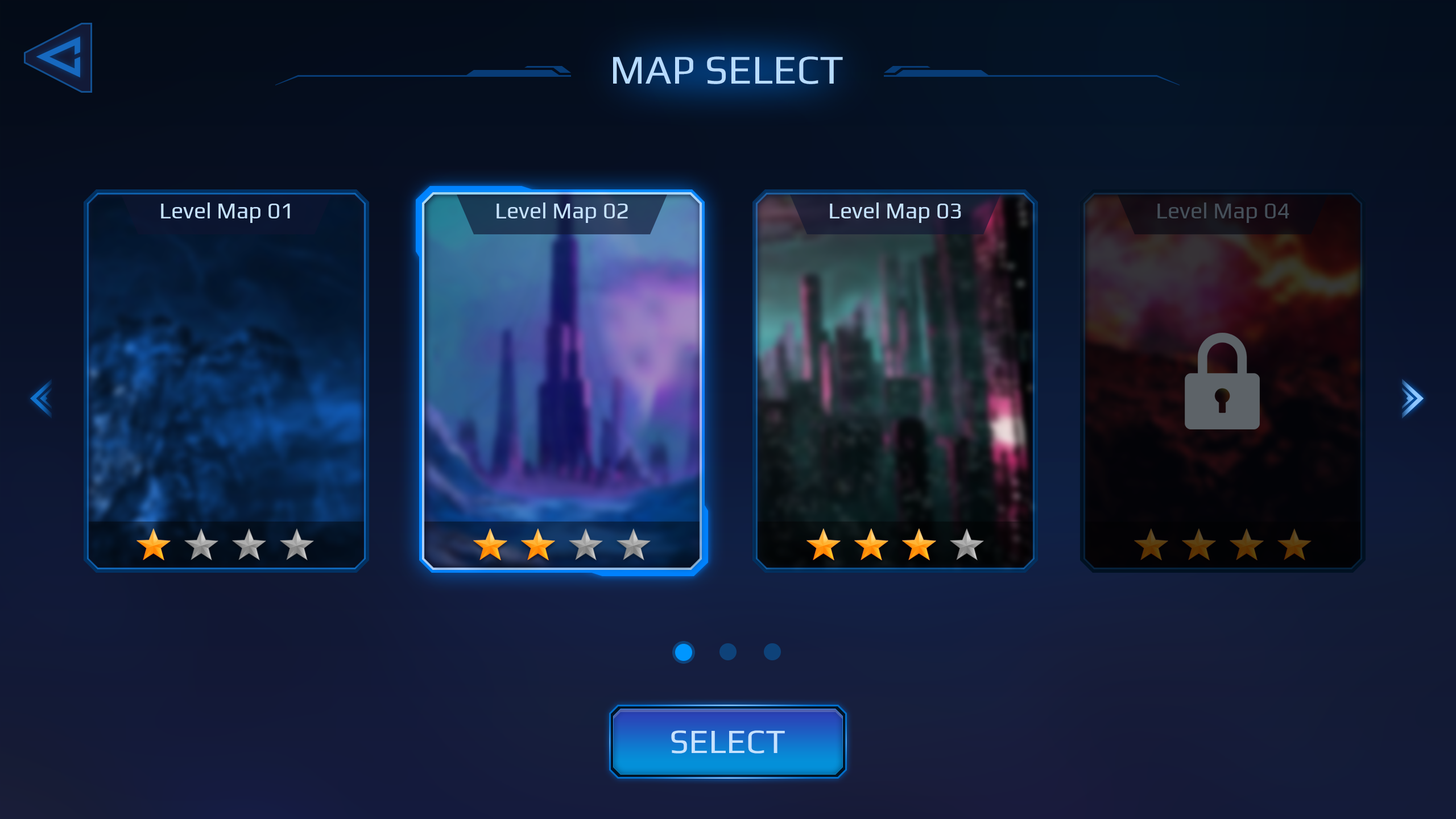
<style>
.page{position:relative;width:1456px;height:819px}
.page>*{position:absolute;margin:0}
.t1{font:40.9px "Play-Regular";color:#b7dbff}
.t2{font:22.7px "Play-Regular";color:#c6e2ff}
.t3{font:22.7px "Play-Regular";color:#454f59}
.t4{font:34.1px "Play-Regular";color:#c6e2ff}
</style>
<div class="page">
<p class="t1" style="left:613px;top:56px;width:230px;height:28px">MAP SELECT</p>
<p class="t2" style="left:161px;top:202px;width:129px;height:21px">Level Map 01</p>
<p class="t2" style="left:497px;top:202px;width:131px;height:21px">Level Map 02</p>
<p class="t2" style="left:830px;top:202px;width:131px;height:21px">Level Map 03</p>
<p class="t3" style="left:1157px;top:202px;width:132px;height:21px">Level Map 04</p>
<p class="t4" style="left:671px;top:730px;width:114px;height:24px">SELECT</p>
</div>
